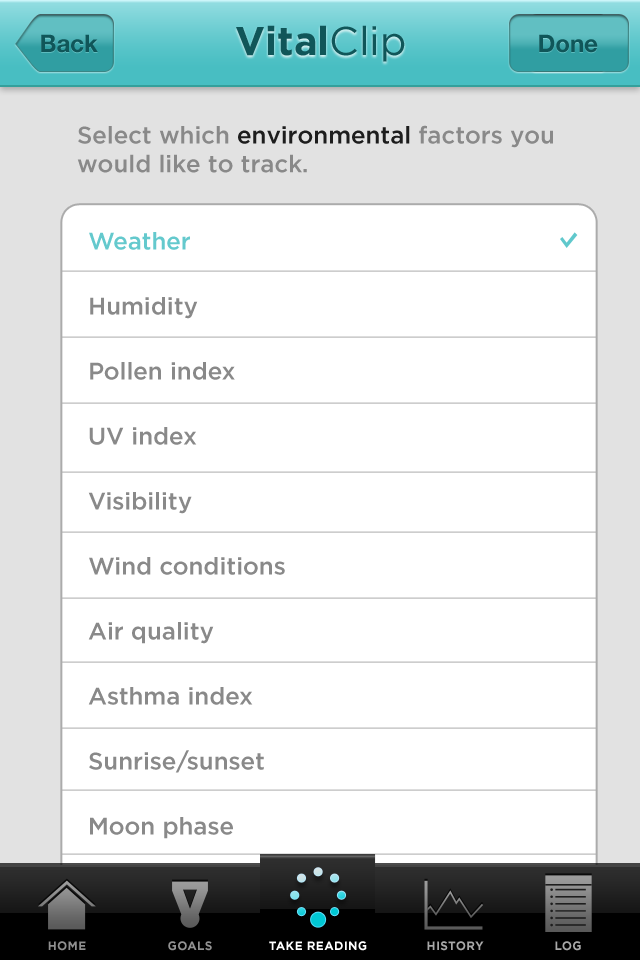
<style>
.page{position:relative;width:640px;height:960px;background:#ffffff}
.page>*{position:absolute;margin:0}
.t1{font:40px "Gotham-Bold";color:#105659}
.t2{font:40px "Gotham-Book";color:#105659}
.t3{font:24px "HelveticaNeue-Bold";color:#105659}
.t4{font:24px "Gotham-Medium";color:#898989}
.t5{font:24px "Gotham-Medium";color:#1d1d1d}
.t6{font:24px/65px "Gotham-Medium";color:#898989}
.t7{font:24px/65px "Gotham-Medium";color:#64c9cd}
.t8{font:12px "Gotham-Bold";letter-spacing:0.025em;color:#8f8f8f;text-transform:uppercase}
.t9{font:12px "Gotham-Bold";letter-spacing:0.025em;color:#929292;text-transform:uppercase}
.t10{font:12px "Gotham-Bold";letter-spacing:0.025em;color:#ffffff;text-transform:uppercase}
.t11{font:12px "Gotham-Bold";letter-spacing:0.025em;color:#a8a8a8;text-transform:uppercase}
</style>
<div class="page">
<p class="t1" style="left:236px;top:25px;width:169px;height:37px">Vital<span class="t2">Clip</span></p>
<p class="t3" style="left:41px;top:34px;width:57px;height:19px">Back</p>
<p class="t3" style="left:539px;top:34px;width:59px;height:19px">Done</p>
<p class="t4" style="left:77px;top:125px;width:476px;height:48px">Select which <span class="t5">environmental </span>factors you<br>would like to track.</p>
<p class="t6" style="left:88px;top:232px;width:197px;height:672px"><span class="t7">Weather<br></span>Humidity<br>Pollen index<br>UV index<br>Visibility<br>Wind conditions<br>Air quality<br>Asthma index<br>Sunrise/sunset<br>Moon phase<br>Planetary cycles</p>
<p class="t8" style="left:48px;top:941px;width:38px;height:10px">Home</p>
<p class="t9" style="left:168px;top:941px;width:44px;height:10px">Goals</p>
<p class="t10" style="left:269px;top:941px;width:98px;height:10px">Take reading</p>
<p class="t11" style="left:427px;top:941px;width:57px;height:10px">History</p>
<p class="t11" style="left:555px;top:941px;width:26px;height:10px">Log</p>
</div>
